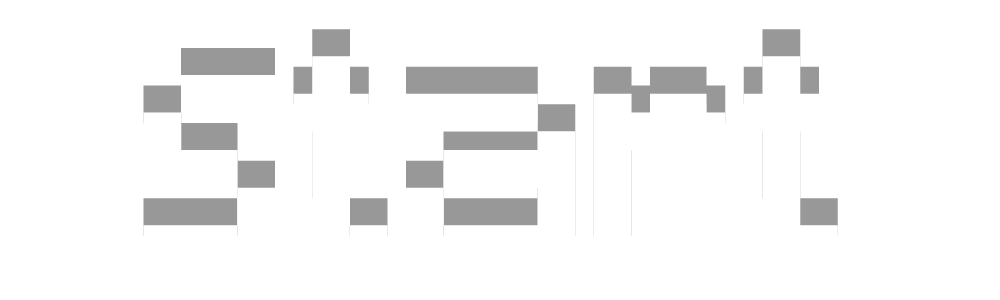
<style>
.page{position:relative;width:1000px;height:300px;background:#ffffff}
.page>*{position:absolute;margin:0}
.t1{font:300.1px "Minecraft";color:#ffffff}
</style>
<div class="page">
<p class="t1" style="left:143px;top:56px;width:695px;height:207px;opacity:0.95">start</p>
</div>
